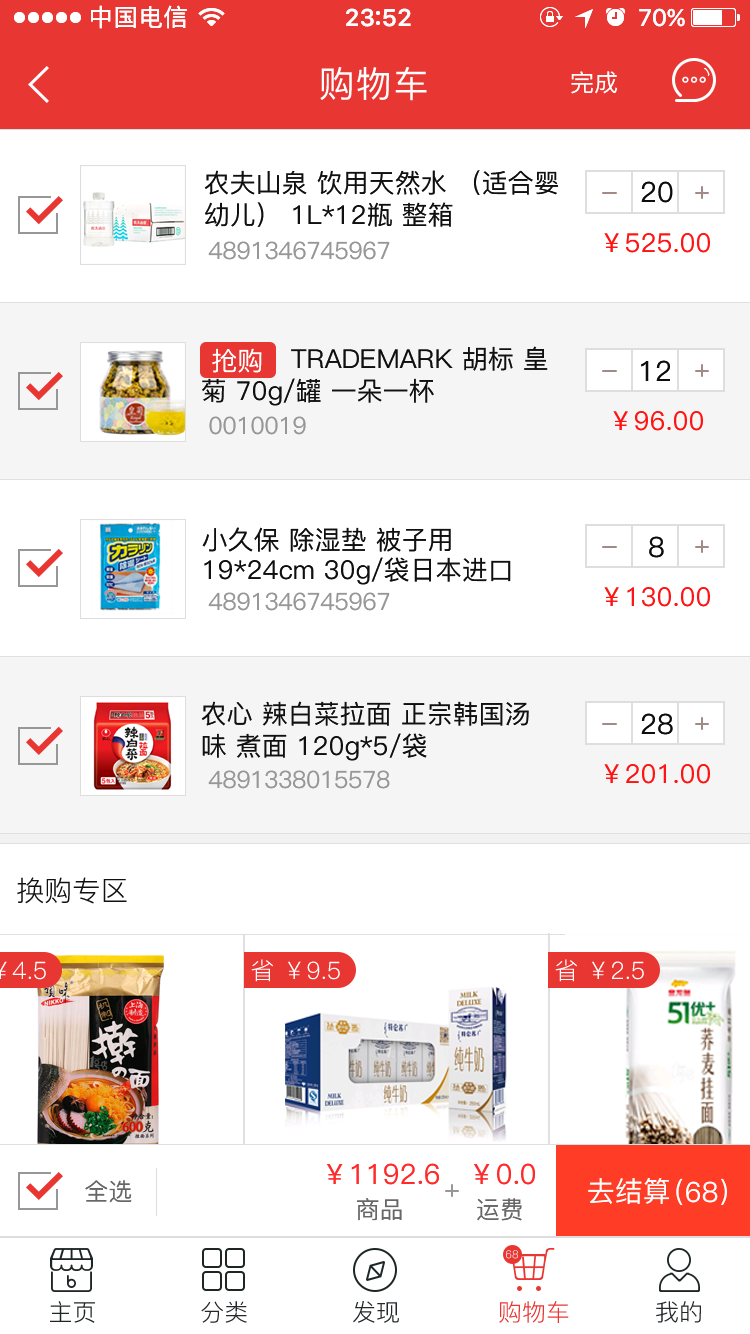
<style>
.page{position:relative;width:750px;height:1334px;background:#ffffff}
.page>*{position:absolute;margin:0}
.t1{font:24px "PingFang-SC-Medium";color:#ffffff}
.t2{font:26px/32px "PingFang-SC-Medium";color:#101010}
.t3{font:28px "PingFang-SC-Medium";color:#0d0d0d}
.t4{font:26px "PingFang-SC-Medium";color:#ff1414}
.t5{font:24px "PingFang-SC-Medium";color:#979797}
.t6{font:26px/30px "PingFang-SC-Medium";color:#ffffff}
.t7{font:26px "PingFang-SC-Medium";color:#ffffff}
.t8{font:26px/30px "PingFang-SC-Medium";color:#101010}
.t9{font:28px "PingFang-SC-Regular";color:#111111}
.t10{font:24px "PingFang-SC-Regular";color:#ffffff}
.t11{font:28px "PingFang-SC-Medium";color:#ff2a2a}
.t12{font:24px "PingFang-SC-Medium";color:#676767}
.t13{font:28px "PingFang-SC-Medium";color:#ffffff}
.t14{font:11px "PingFang-SC-Regular"}
.t15{font:23.7px "PingFang-SC-Regular";color:#1e2625}
.t16{font:23.7px "PingFang-SC-Regular";color:#25282a}
.t17{font:23.7px "PingFang-SC-Regular";color:#e83632}
</style>
<div class="page">
<p class="t1" style="left:571px;top:71px;width:47px;height:23px">完成</p>
<p class="t2" style="left:204px;top:170px;width:354px;height:57px">农夫山泉 饮用天然水 （适合婴<br>幼儿） 1L*12瓶 整箱</p>
<p class="t3" style="left:641px;top:181px;width:32px;height:22px">20</p>
<p class="t4" style="left:604px;top:233px;width:106px;height:20px">￥525.00</p>
<p class="t5" style="left:208px;top:241px;width:182px;height:19px">4891346745967</p>
<p class="t2" style="left:202px;top:346px;width:346px;height:60px"><span class="t6">          </span>TRADEMARK 胡标 皇<br>菊 70g/罐 一朵一杯</p>
<p class="t7" style="left:212px;top:348px;width:50px;height:25px">抢购</p>
<p class="t3" style="left:641px;top:360px;width:29px;height:21px">12</p>
<p class="t4" style="left:613px;top:411px;width:90px;height:20px">￥96.00</p>
<p class="t5" style="left:209px;top:416px;width:97px;height:19px">0010019</p>
<p class="t8" style="left:202px;top:527px;width:309px;height:58px">小久保 除湿垫 被子用<br>19*24cm 30g/袋日本进口</p>
<p class="t3" style="left:649px;top:536px;width:15px;height:22px">8</p>
<p class="t5" style="left:208px;top:592px;width:182px;height:19px">4891346745967</p>
<p class="t4" style="left:604px;top:587px;width:106px;height:20px">￥130.00</p>
<p class="t2" style="left:201px;top:701px;width:328px;height:60px">农心 辣白菜拉面 正宗韩国汤<br>味 煮面 120g*5/袋</p>
<p class="t3" style="left:641px;top:713px;width:32px;height:22px">28</p>
<p class="t5" style="left:208px;top:770px;width:182px;height:19px">4891338015578</p>
<p class="t4" style="left:604px;top:764px;width:106px;height:20px">￥201.00</p>
<p class="t9" style="left:17px;top:877px;width:110px;height:27px">换购专区</p>
<p class="t10" style="left:251px;top:959px;width:89px;height:23px">省 ￥9.5</p>
<p class="t10" style="left:555px;top:959px;width:89px;height:23px">省 ￥2.5</p>
<p class="t11" style="left:327px;top:1163px;width:208px;height:22px">￥1192.6   ￥0.0</p>
<p class="t12" style="left:85px;top:1180px;width:47px;height:23px">全选</p>
<p class="t13" style="left:588px;top:1178px;width:81px;height:26px">去结算</p>
<p class="t13" style="left:676px;top:1178px;width:51px;height:27px">（68）</p>
<p class="t12" style="left:357px;top:1198px;width:165px;height:23px">商品         运费</p>
<p class="t14" style="left:506px;top:1250px;width:12px;height:9px">68</p>
<p class="t15" style="left:50px;top:1301px;width:45px;height:22px">主页</p>
<p class="t16" style="left:201px;top:1301px;width:46px;height:22px">分类</p>
<p class="t16" style="left:353px;top:1301px;width:46px;height:22px">发现</p>
<p class="t17" style="left:499px;top:1301px;width:70px;height:22px">购物车</p>
<p class="t16" style="left:656px;top:1301px;width:45px;height:22px">我的</p>
</div>
